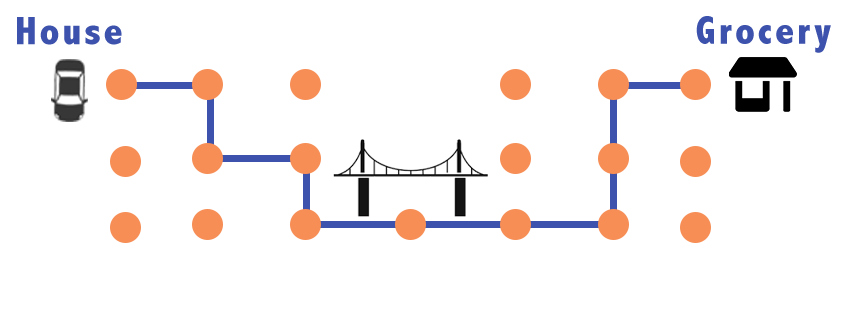
<style>
.page{position:relative;width:855px;height:326px;background:#ffffff}
.page>*{position:absolute;margin:0}
.t1{font:40px "AbadiMT-CondensedExtraBold";letter-spacing:0.075em;color:#3d52ac}
</style>
<div class="page">
<p class="t1" style="left:17px;top:17px;width:105px;height:28px">House</p>
<p class="t1" style="left:696px;top:16px;width:135px;height:37px">Grocery</p>
</div>
